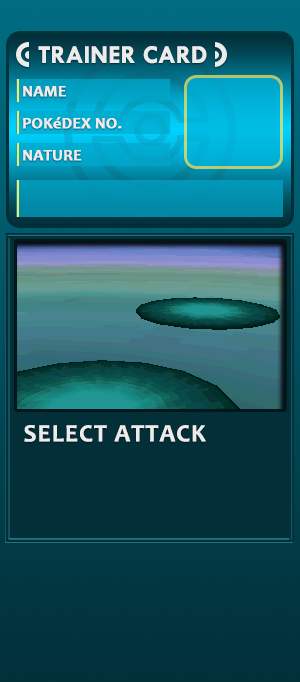
<style>
.page{position:relative;width:300px;height:682px}
.page>*{position:absolute;margin:0}
.t1{font:26px "TwCenMT-Bold";color:#ececec}
.t2{font:16px "Candara-Bold";color:#ececec;font-weight:bold}
.t3{font:25px "Candara-Bold";letter-spacing:0.04em;color:#ececec}
</style>
<div class="page">
<p class="t1" style="left:38px;top:46px;width:169px;height:18px">TRAINER CARD</p>
<p class="t2" style="left:23px;top:86px;width:43px;height:11px">NAME</p>
<p class="t2" style="left:23px;top:117px;width:99px;height:12px">POKéDEX NO.</p>
<p class="t2" style="left:23px;top:150px;width:59px;height:11px">NATURE</p>
<p class="t3" style="left:24px;top:425px;width:182px;height:17px">SELECT ATTACK</p>
</div>
